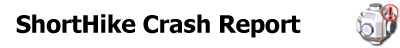
<style>
.page{position:relative;width:400px;height:48px;background:#ffffff}
.page>*{position:absolute;margin:0}
.t1{font:24px "Tahoma-Bold";color:#000000}
</style>
<div class="page">
<p class="t1" style="left:16px;top:14px;width:285px;height:24px">ShortHike Crash Report</p>
</div>
